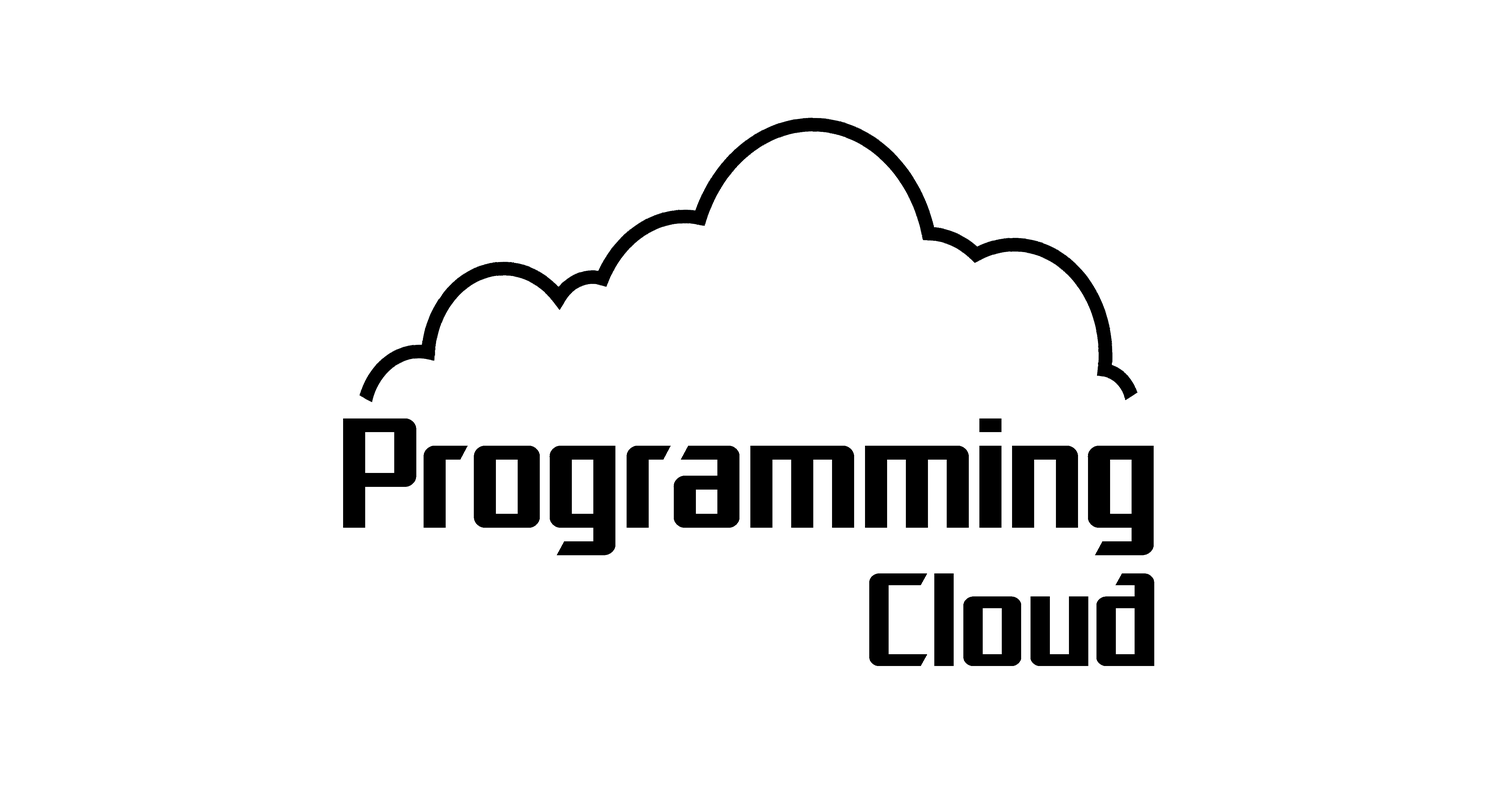
<style>
.page{position:relative;width:1501px;height:794px;background:#ffffff}
.page>*{position:absolute;margin:0}
.t1{font:163.9px "SFElectrotome";color:#000000;scale:1.07 1}
.t2{font:138.7px "SFElectrotome";color:#000000;scale:1.11 1}
</style>
<div class="page">
<p class="t1" style="left:343px;top:419px;width:811px;height:136px">Programming</p>
<p class="t2" style="left:870px;top:574px;width:285px;height:92px">Cloud</p>
</div>
